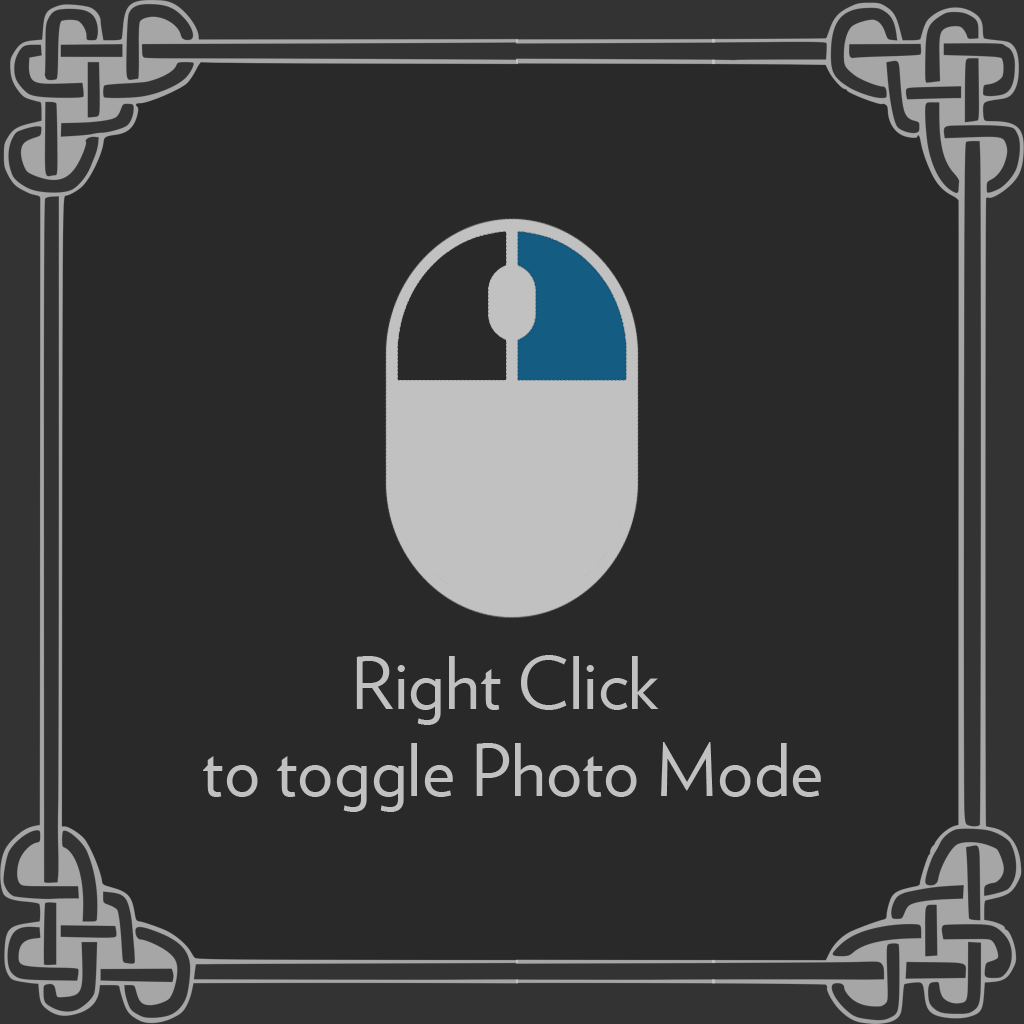
<style>
.page{position:relative;width:1024px;height:1024px;background:#292929}
.page>*{position:absolute;margin:0}
.t1{font:72px "Verlag-Book";color:#c1c1c1}
</style>
<div class="page">
<p class="t1" style="left:203px;top:655px;width:618px;height:157px;text-align:center">Right Click <br>to toggle Photo Mode</p>
</div>
